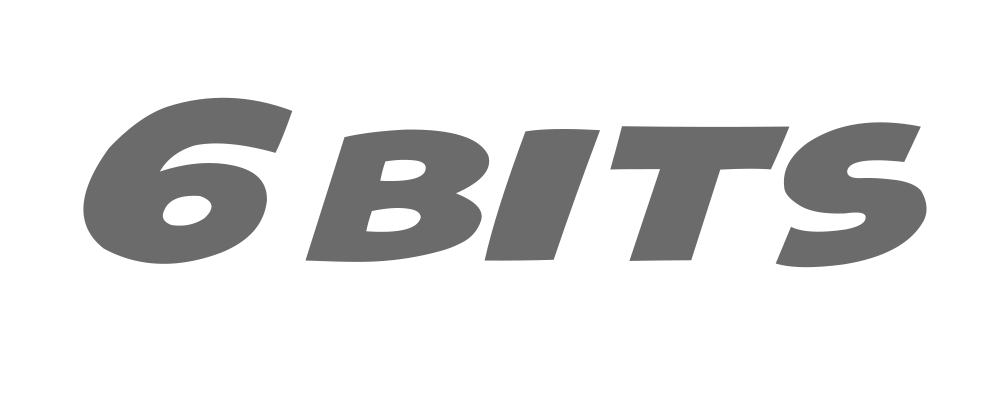
<style>
.page{position:relative;width:1000px;height:400px;background:#ffffff}
.page>*{position:absolute;margin:0}
.t1{font:125px "HeroesLegend";color:#6b6b6b;scale:1.55 1}
</style>
<div class="page">
<p class="t1" style="left:83px;top:97px;width:844px;height:171px">6 bits</p>
</div>
